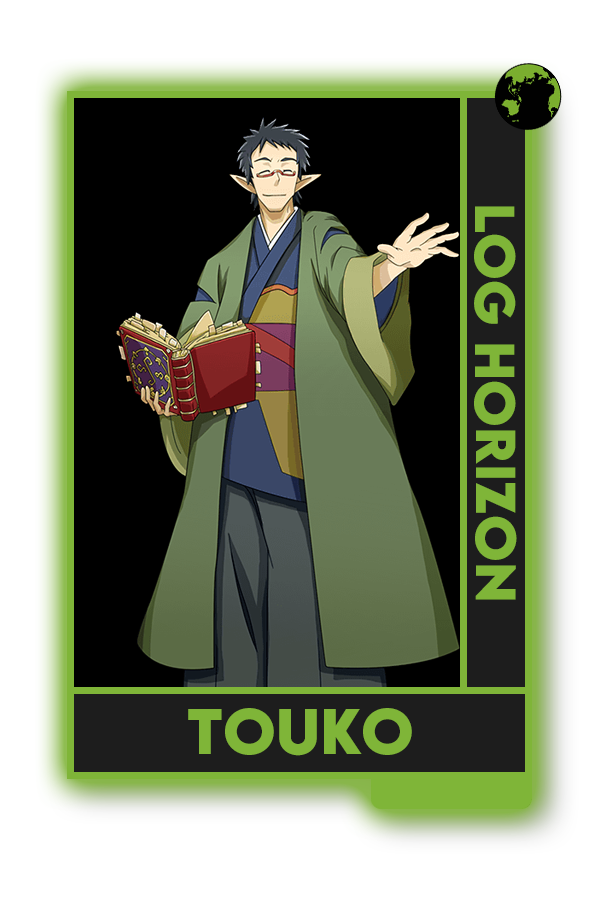
<style>
.page{position:relative;width:600px;height:900px;background:#ffffff}
.page>*{position:absolute;margin:0}
.t1{font:50px "LEMONMILK-Bold";color:#7fad41}
.t2{font:56.7px "LEMONMILK-Bold";color:#7fad41}
</style>
<div class="page">
<p class="t1" style="left:474px;top:206px;width:43px;height:394px;rotate:90deg">Log Horizon</p>
<p class="t2" style="left:188px;top:708px;width:224px;height:48px">Touko</p>
</div>
